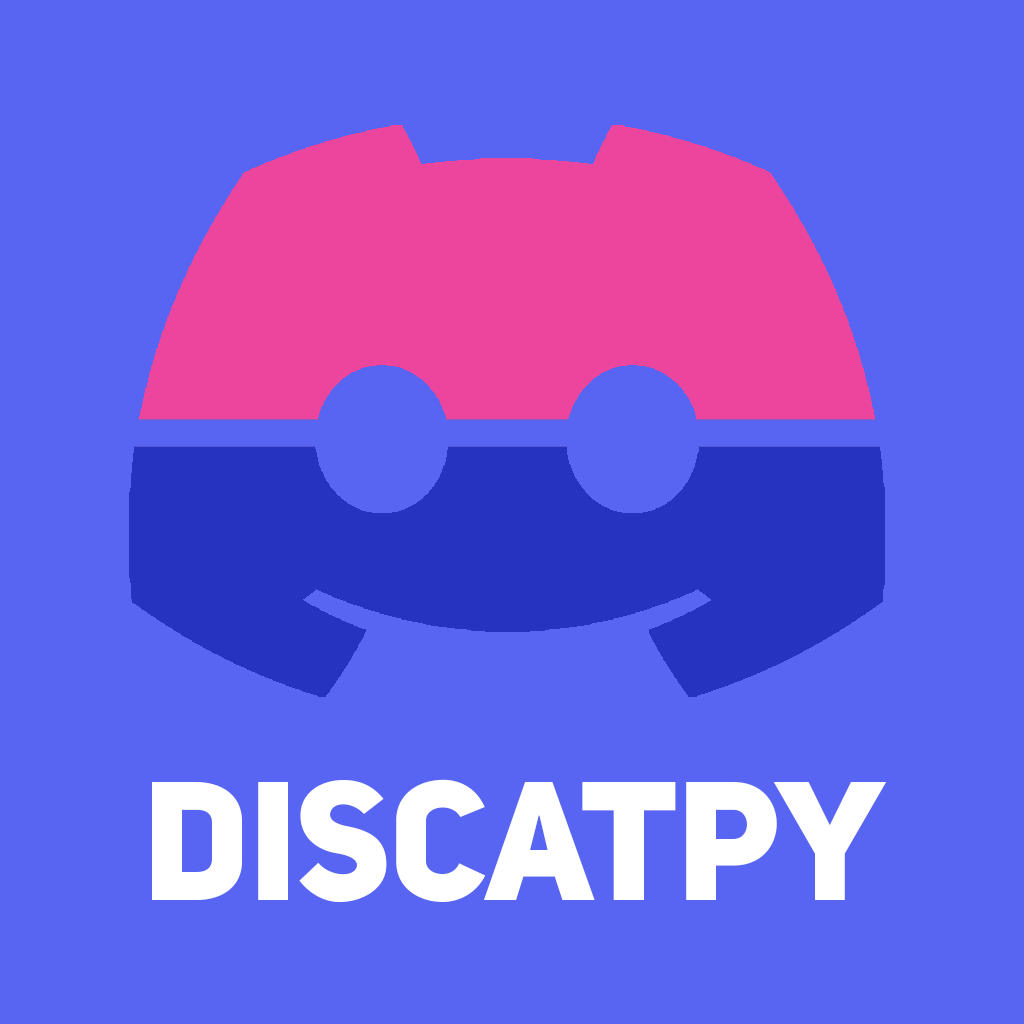
<style>
.page{position:relative;width:1024px;height:1024px;background:#5865f2}
.page>*{position:absolute;margin:0}
.t1{font:166.7px "UniSansHeavyCAPS";letter-spacing:-0.004em;color:#ffffff}
</style>
<div class="page">
<p class="t1" style="left:152px;top:779px;width:735px;height:124px">DisCatPy</p>
</div>
